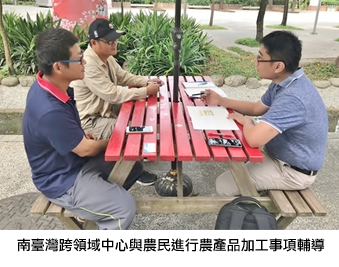
<style>
.page{position:relative;width:339px;height:267px}
.page>*{position:absolute;margin:0}
.t1{font:14px "LiHeiPro";color:#000000}
</style>
<div class="page">
<p class="t1" style="left:17px;top:238px;width:308px;height:14px">南臺灣跨領域中心與農民進行農產品加工事項輔導</p>
</div>
